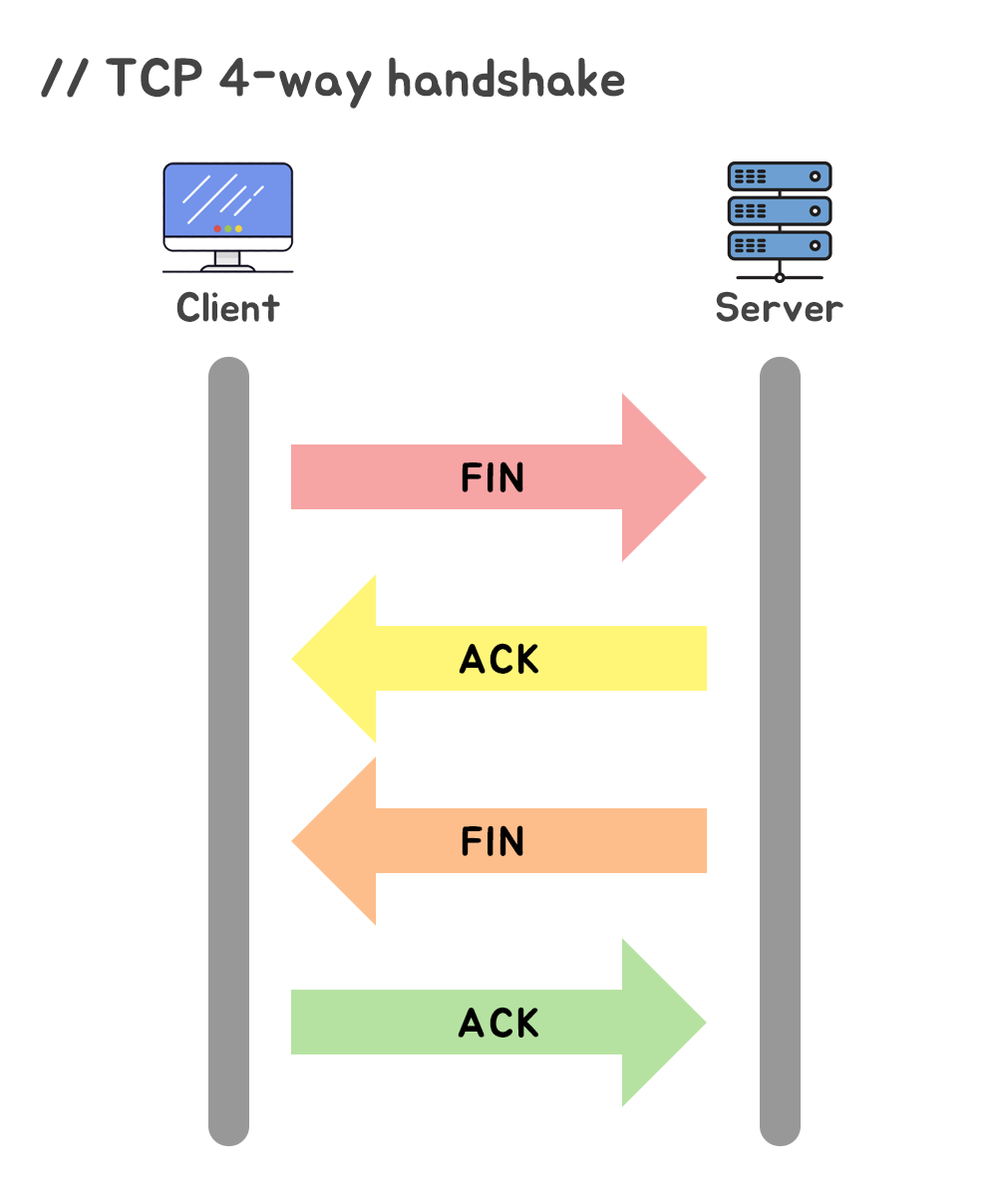
<style>
.page{position:relative;width:997px;height:1196px;background:#ffffff}
.page>*{position:absolute;margin:0}
.t1{font:54px "BMJUA";color:#444444}
.t2{font:41.5px "BMJUA";color:#444444}
.t3{font:41.5px "BMJUA";letter-spacing:0.05em;color:#000000}
</style>
<div class="page">
<p class="t1" style="left:41px;top:57px;width:584px;height:52px">// TCP 4-way handshake</p>
<p class="t2" style="left:176px;top:291px;width:104px;height:31px">Client</p>
<p class="t2" style="left:716px;top:291px;width:127px;height:31px">Server</p>
<p class="t3" style="left:462px;top:462px;width:61px;height:30px">FIN</p>
<p class="t3" style="left:459px;top:643px;width:79px;height:31px">ACK</p>
<p class="t3" style="left:462px;top:825px;width:61px;height:31px">FIN</p>
<p class="t3" style="left:458px;top:1007px;width:80px;height:31px">ACK</p>
</div>
